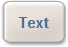
<style>
.page{position:relative;width:68px;height:47px}
.page>*{position:absolute;margin:0}
.t1{font:14px "Pronto";color:#4c7097}
</style>
<div class="page">
<p class="t1" style="left:18px;top:17px;width:31px;height:11px">Text</p>
</div>
